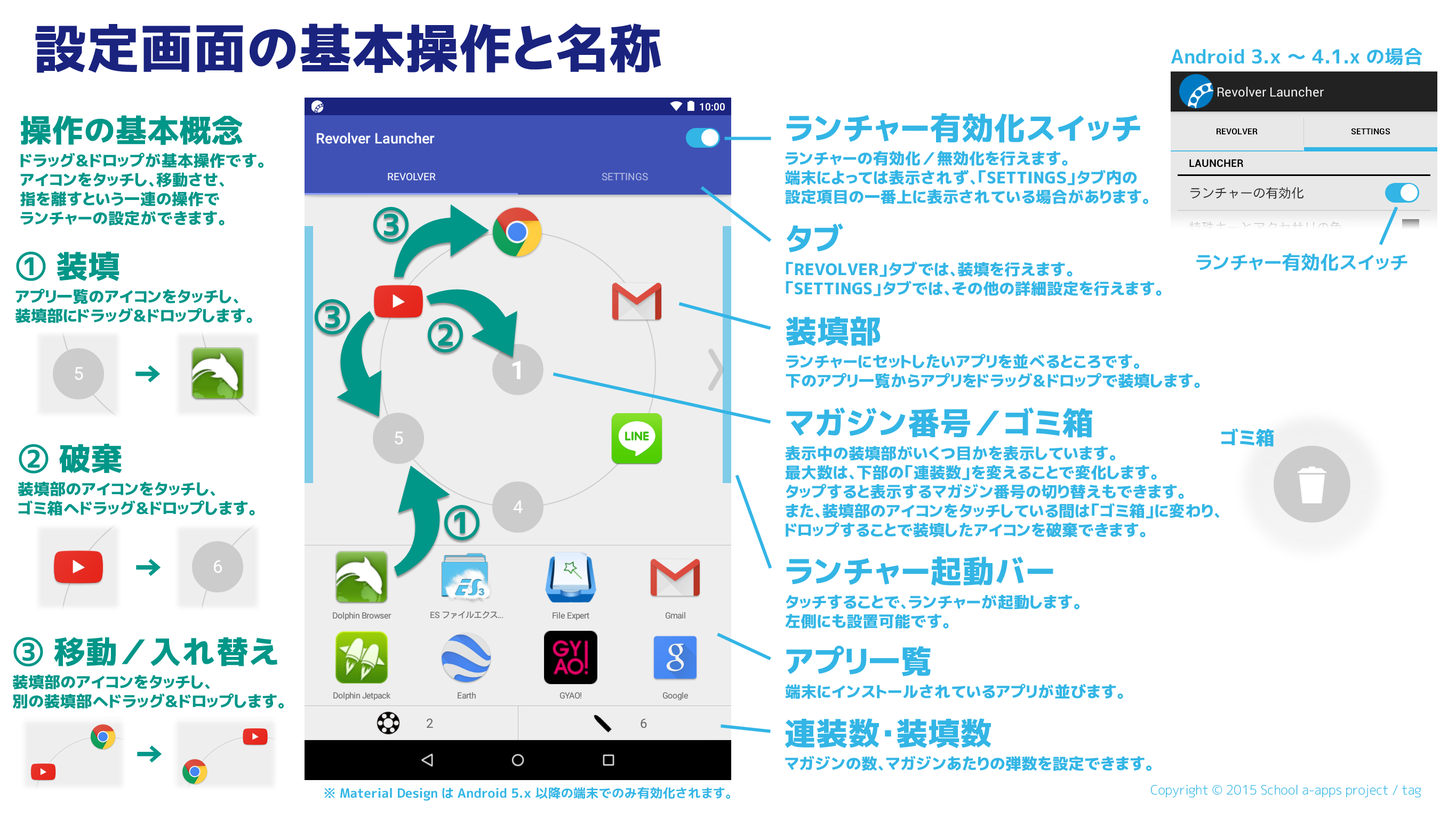
<style>
.page{position:relative;width:1456px;height:819px;background:#ffffff}
.page>*{position:absolute;margin:0}
.t1{font:53.3px "mgenplus-2cp-heavy";color:#1a237e}
.t2{font:19.2px "mgenplus-2cp-bold";color:#33b5e5}
.t3{font:16px/19.2px "mgenplus-2cp-heavy";color:#33b5e5}
.t4{font:32px/38.4px "mgenplus-2cp-heavy";color:#33b5e5}
.t5{font:16px/19.2px "mgenplus-2cp-heavy";color:#009688}
.t6{font:32px/38.4px "mgenplus-2cp-heavy";color:#009688}
.t7{font:38.4px "mgenplus-2cp-heavy";color:#009688}
.t8{font:32px "mgenplus-2cp-heavy";color:#04988a}
.t9{font:19.2px "mgenplus-2cp-heavy";color:#33b5e5}
.t10{font:16px/38.4px "mgenplus-2cp-heavy";color:#33b5e5}
.t11{font:12.8px "mgenplus-2cp-light";color:#33b5e5}
.t12{font:12.8px "mgenplus-2cp-bold";color:#33b5e5}
</style>
<div class="page">
<p class="t1" style="left:35px;top:23px;width:626px;height:50px">設定画面の基本操作と名称</p>
<p class="t2" style="left:1171px;top:48px;width:251px;height:18px">Android 3.ｘ ～ 4.1.x の場合</p>
<p class="t3" style="left:785px;top:113px;width:363px;height:91px"><span class="t4">ランチャー有効化スイッチ<br></span>ランチャーの有効化／無効化を行えます。<br>端末によっては表示されず、「SETTINGＳ」タブ内の<br>設定項目の一番上に表示されている場合があります。</p>
<p class="t5" style="left:20px;top:115px;width:243px;height:111px"><span class="t6">操作の基本概念<br></span>ドラッグ＆ドロップが基本操作です。<br>アイコンをタッチし、移動させ、<br>指を離すという一連の操作で<br>ランチャーの設定ができます。</p>
<p class="t7" style="left:373px;top:207px;width:35px;height:35px">③</p>
<p class="t3" style="left:785px;top:223px;width:376px;height:73px"><span class="t4">タブ<br></span>「REVOLVER」タブでは、装填を行えます。<br>「SETTINGS」タブでは、その他の詳細設定を行えます。</p>
<p class="t5" style="left:15px;top:252px;width:237px;height:71px"><span class="t6">① 装填</span><br>アプリ一覧のアイコンをタッチし、<br>装填部にドラッグ＆ドロップします。</p>
<p class="t2" style="left:1196px;top:253px;width:211px;height:18px">ランチャー有効化スイッチ</p>
<p class="t7" style="left:315px;top:299px;width:35px;height:35px">③</p>
<p class="t7" style="left:428px;top:317px;width:35px;height:35px">②</p>
<p class="t3" style="left:785px;top:316px;width:415px;height:72px"><span class="t4">装填部<br></span>ランチャーにセットしたいアプリを並べるところです。<br>下のアプリ一覧からアプリをドラッグ＆ドロップで装填します。</p>
<p class="t8" style="left:135px;top:365px;width:26px;height:17px">→</p>
<p class="t3" style="left:785px;top:407px;width:435px;height:131px"><span class="t4">マガジン番号／ゴミ箱<br></span>表示中の装填部がいくつ目かを表示しています。<br>最大数は、下部の「連装数」を変えることで変化します。<br>タップすると表示するマガジン番号の切り替えもできます。<br>また、装填部のアイコンをタッチしている間は「ゴミ箱」に変わり、<br>ドロップすることで装填したアイコンを破棄できます。</p>
<p class="t9" style="left:1221px;top:428px;width:53px;height:19px">ゴミ箱</p>
<p class="t5" style="left:18px;top:444px;width:237px;height:72px"><span class="t6">② 破棄<br></span>装填部のアイコンをタッチし、<br>ゴミ箱へドラッグ＆ドロップします。</p>
<p class="t7" style="left:444px;top:505px;width:35px;height:35px">①</p>
<p class="t3" style="left:785px;top:556px;width:294px;height:73px"><span class="t4">ランチャー起動バー<br></span>タッチすることで、ランチャーが起動します。<br>左側にも設置可能です。</p>
<p class="t8" style="left:136px;top:559px;width:25px;height:17px">→</p>
<p class="t5" style="left:12px;top:637px;width:272px;height:72px"><span class="t6">③ 移動／入れ替え<br></span>装填部のアイコンをタッチし、<br>別の装填部へドラッグ＆ドロップします。</p>
<p class="t10" style="left:785px;top:646px;width:338px;height:53px"><span class="t4">アプリ一覧<br></span>端末にインストールされているアプリが並びます。</p>
<p class="t10" style="left:785px;top:718px;width:366px;height:53px"><span class="t4">連装数・装填数<br></span>マガジンの数、マガジンあたりの弾数を設定できます。</p>
<p class="t8" style="left:137px;top:745px;width:25px;height:18px">→</p>
<p class="t11" style="left:1150px;top:784px;width:271px;height:14px">Copyright © 2015 School a-apps project / tag</p>
<p class="t12" style="left:324px;top:787px;width:406px;height:14px">※ Material Design は Android 5.ｘ 以降の端末でのみ有効化されます。</p>
</div>
